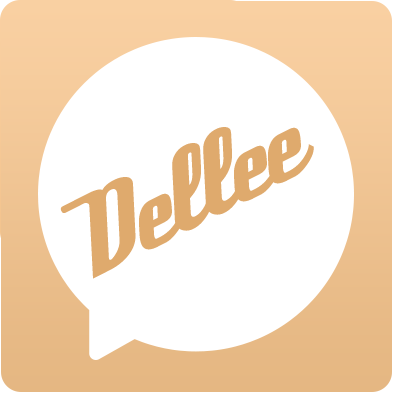
<style>
.page{position:relative;width:393px;height:393px;background:#ffffff}
.page>*{position:absolute;margin:0}
.t1{font:120px "DeftoneStylus";color:#dfaa6d}
</style>
<div class="page">
<p class="t1" style="left:60px;top:127px;width:254px;height:152px;rotate:-27deg">Dellee</p>
</div>
